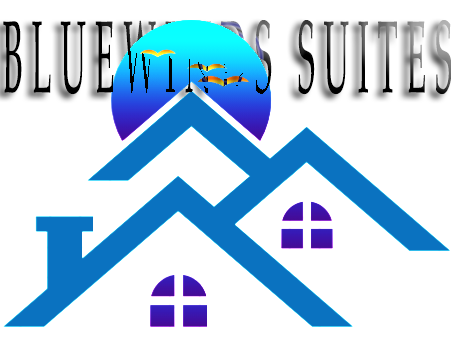
<style>
.page{position:relative;width:451px;height:337px;background:#ffffff}
.page>*{position:absolute;margin:0}
.t1{font:102.4px "PalatinoLinotype-Roman";letter-spacing:0.27em;scale:0.32 1}
</style>
<div class="page">
<p class="t1" style="left:3px;top:20px;width:449px;height:75px">BLUEWINDS SUITES</p>
</div>
